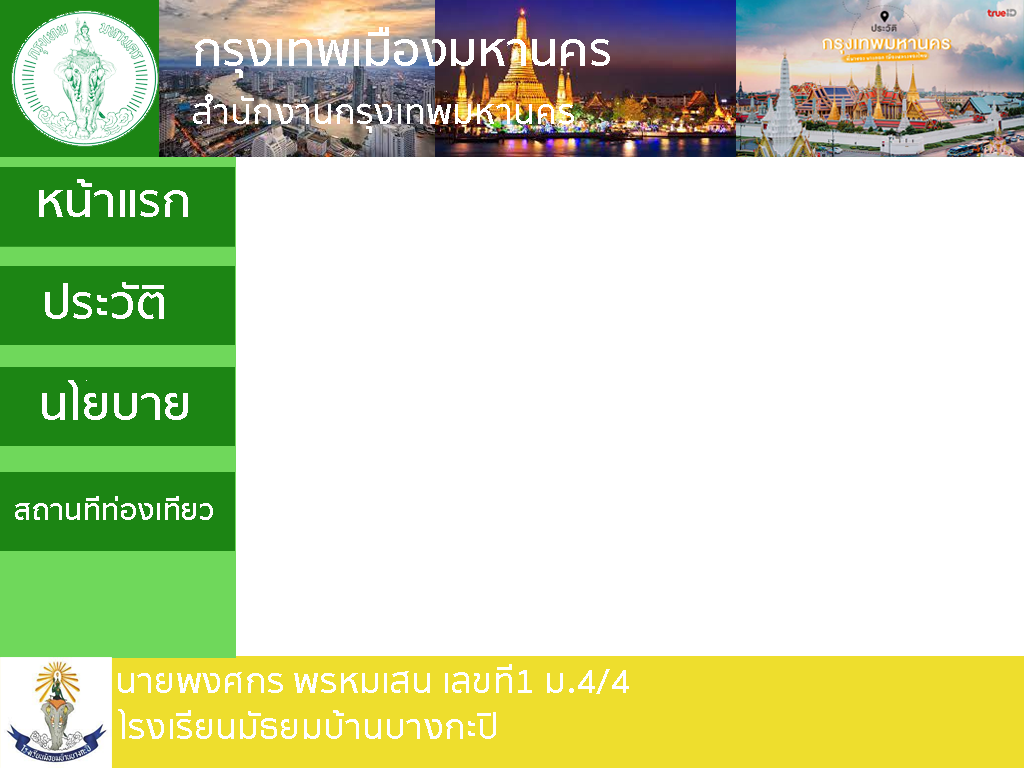
<style>
.page{position:relative;width:1024px;height:768px;background:#ffffff}
.page>*{position:absolute;margin:0}
.t1{font:48px "SukhumvitSet-SemiBold";color:#ffffff}
.t2{font:36px "SukhumvitSet-SemiBold";color:#ffffff}
.t3{font:30px "SukhumvitSet-SemiBold";color:#ffffff}
</style>
<div class="page">
<p class="t1" style="left:195px;top:27px;width:415px;height:51px">กรุงเทพเมืองมหานคร</p>
<p class="t2" style="left:193px;top:94px;width:381px;height:39px">สำนักงานกรุงเทพมหานคร</p>
<p class="t1" style="left:39px;top:179px;width:149px;height:38px">หน้าแรก</p>
<p class="t1" style="left:45px;top:282px;width:119px;height:37px">ประวัติ</p>
<p class="t1" style="left:42px;top:380px;width:146px;height:40px">นโยบาย</p>
<p class="t3" style="left:15px;top:496px;width:198px;height:24px">สถานที่ท่องเที่ยว</p>
<p class="t2" style="left:118px;top:664px;width:511px;height:30px">นายพงศกร พรหมเสน เลขที่1 ม.4/4</p>
</div>
